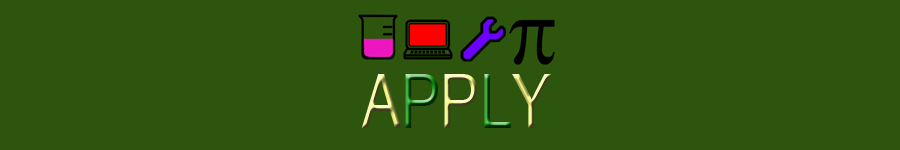
<style>
.page{position:relative;width:900px;height:150px;background:#2d550d}
.page>*{position:absolute;margin:0}
.t1{font:74.9px "ArialMT";scale:0.79 1}
</style>
<div class="page">
<p class="t1" style="left:361px;top:74px;width:190px;height:54px">APPLY</p>
</div>
